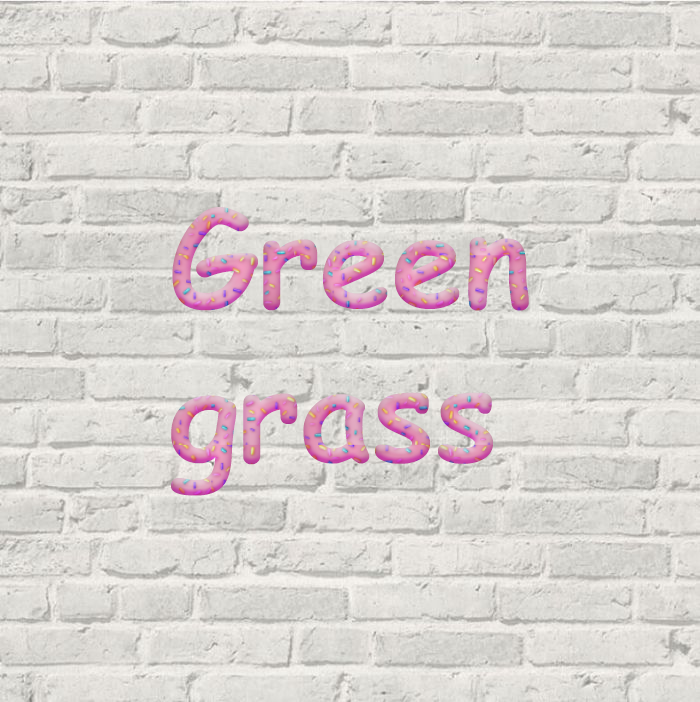
<style>
.page{position:relative;width:700px;height:702px}
.page>*{position:absolute;margin:0}
.t1{font:129px "ComicSansMS-Bold"}
</style>
<div class="page">
<p class="t1" style="left:170px;top:207px;width:359px;height:289px">Green <br>grass</p>
</div>
